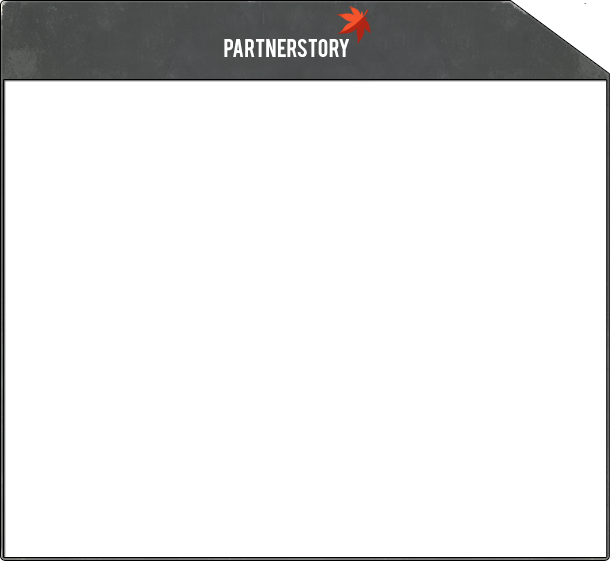
<style>
.page{position:relative;width:610px;height:561px;background:#ffffff}
.page>*{position:absolute;margin:0}
.t1{font:20px "Bebas";color:#ffffff}
</style>
<div class="page">
<p class="t1" style="left:224px;top:39px;width:125px;height:18px">PartnerStory</p>
</div>
